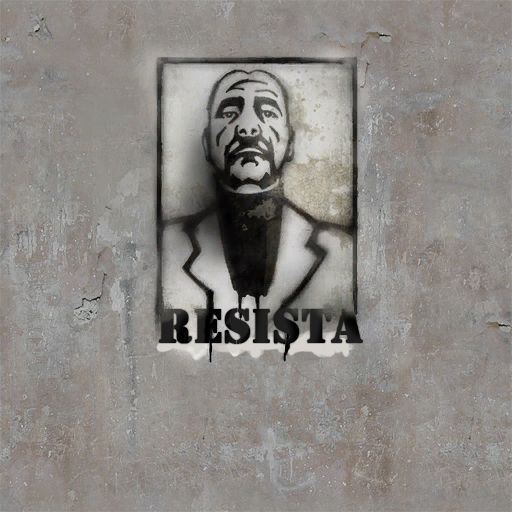
<style>
.page{position:relative;width:512px;height:512px}
.page>*{position:absolute;margin:0}
.t1{font:49.4px "Army";font-weight:bold}
</style>
<div class="page">
<p class="t1" style="left:159px;top:308px;width:204px;height:36px">RESISTA</p>
</div>
